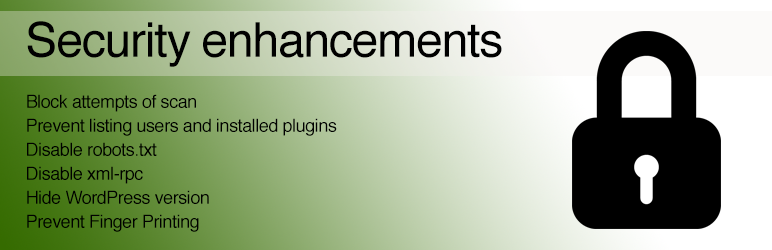
<style>
.page{position:relative;width:772px;height:250px}
.page>*{position:absolute;margin:0}
.t1{font:48px "Helvetica";letter-spacing:-0.025em;color:#000000}
.t2{font:18px/24px "Helvetica";letter-spacing:-0.025em;color:#000000}
</style>
<div class="page">
<p class="t1" style="left:27px;top:21px;width:475px;height:46px">Security enhancements</p>
<p class="t2" style="left:27px;top:94px;width:310px;height:138px">Block attempts of scan<br>Prevent listing users and installed plugins<br>Disable robots.txt<br>Disable xml-rpc<br>Hide WordPress version<br>Prevent Finger Printing</p>
</div>
